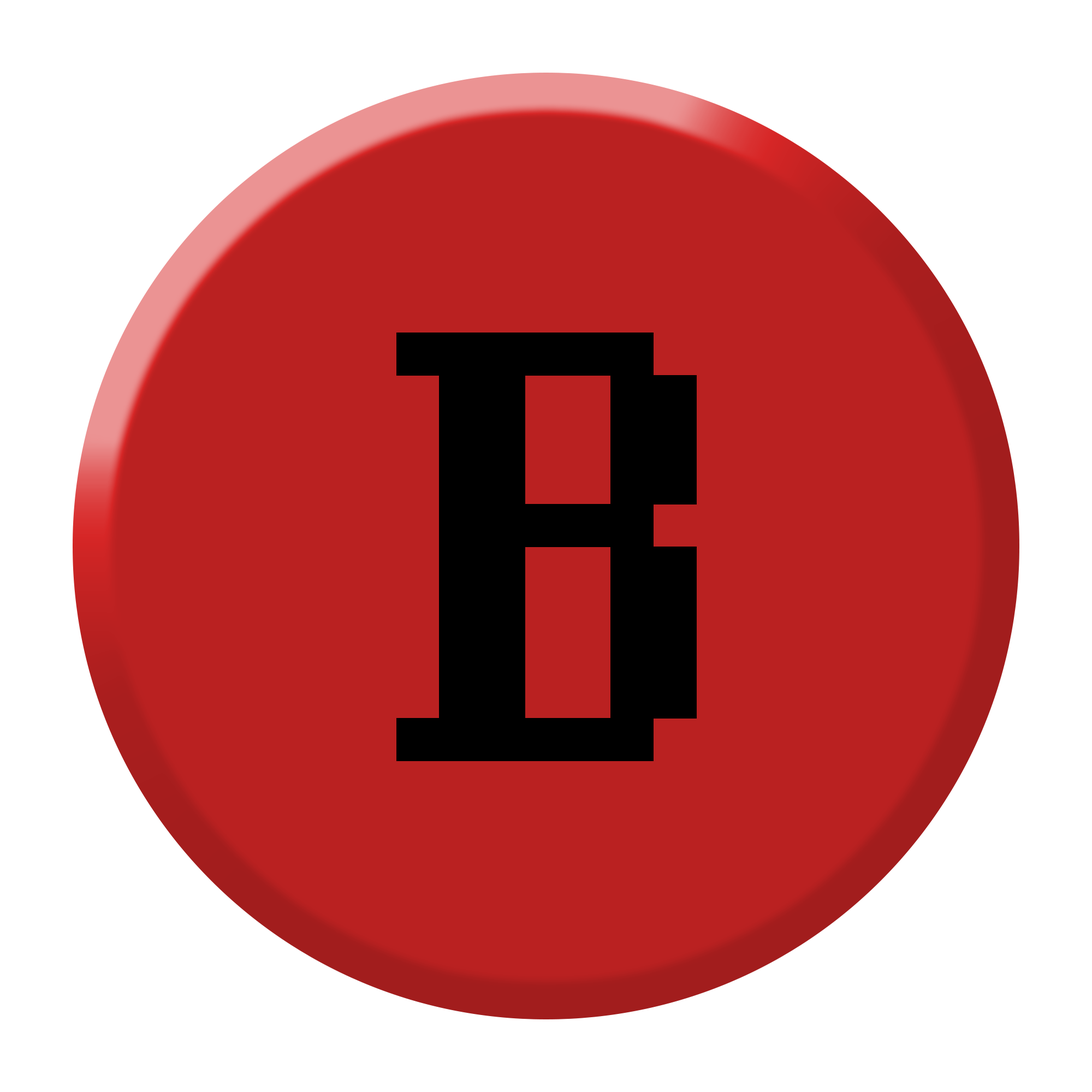
<style>
.page{position:relative;width:1092px;height:1092px;background:#ba2121}
.page>*{position:absolute;margin:0}
.t1{font:685.2px "PerfectDOSVGA437";color:#000000}
</style>
<div class="page">
<p class="t1" style="left:396px;top:333px;width:301px;height:428px">B</p>
</div>
